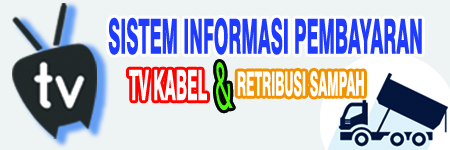
<style>
.page{position:relative;width:450px;height:150px;background:#eef3f3}
.page>*{position:absolute;margin:0}
.t1{font:48.3px "Swiss721BT-Heavy";color:#1e3bff;scale:0.37 1}
.t2{font:63.4px "LucidaSansUnicode";color:#4bff00;scale:0.37 1}
.t3{font:42.1px "Swiss721BT-Heavy";color:#ffffff;scale:0.37 1}
.t4{font:33.5px "Swiss721BT-Heavy";color:#ffffff;scale:0.37 1}
</style>
<div class="page">
<p class="t1" style="left:108px;top:17px;width:314px;height:38px">SISTEM INFORMASI PEMBAYARAN</p>
<p class="t2" style="left:216px;top:62px;width:17px;height:49px;rotate:-7deg">&amp;</p>
<p class="t3" style="left:129px;top:69px;width:78px;height:32px">TV KABEL</p>
<p class="t4" style="left:237px;top:70px;width:127px;height:27px">RETRIBUSI SAMPAH</p>
</div>
